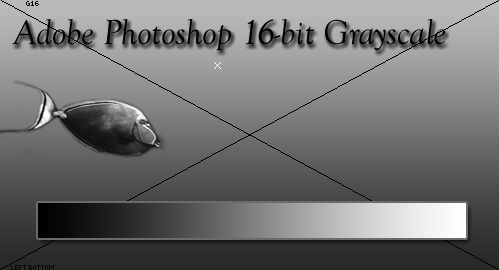
<style>
.page{position:relative;width:499px;height:270px}
.page>*{position:absolute;margin:0}
.t1{font:36px "GoudyOldStyleT-Italic";color:#000000}
</style>
<div class="page">
<p class="t1" style="left:12px;top:19px;width:433px;height:32px">Adobe Photoshop 16-bit Grayscale</p>
</div>
